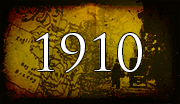
<style>
.page{position:relative;width:180px;height:104px}
.page>*{position:absolute;margin:0}
.t1{font:50px "TrajanPro-Regular";color:#ffffff}
</style>
<div class="page">
<p class="t1" style="left:36px;top:33px;width:106px;height:40px">1910</p>
</div>
